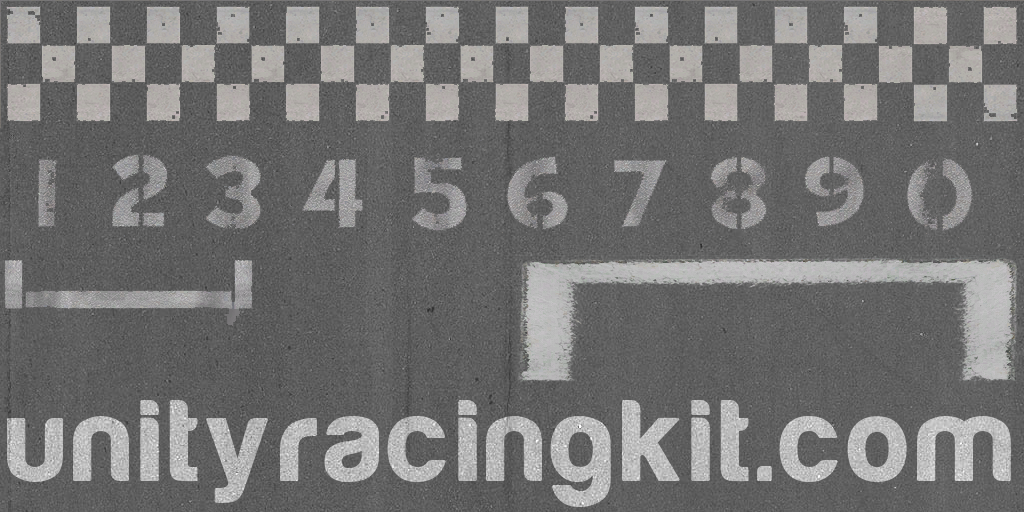
<style>
.page{position:relative;width:1024px;height:512px}
.page>*{position:absolute;margin:0}
.t1{font:117.7px "Harabara";letter-spacing:0.06em;color:#bcbcbc;font-weight:bold}
</style>
<div class="page">
<p class="t1" style="left:7px;top:400px;width:1004px;height:107px">unityracingkit.com</p>
</div>
